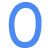
<style>
.page{position:relative;width:50px;height:50px;background:#ffffff}
.page>*{position:absolute;margin:0}
.t1{font:60px "ComicSansMS";color:#4b8af2}
</style>
<div class="page">
<p class="t1" style="left:8px;top:2px;width:34px;height:46px">0</p>
</div>
